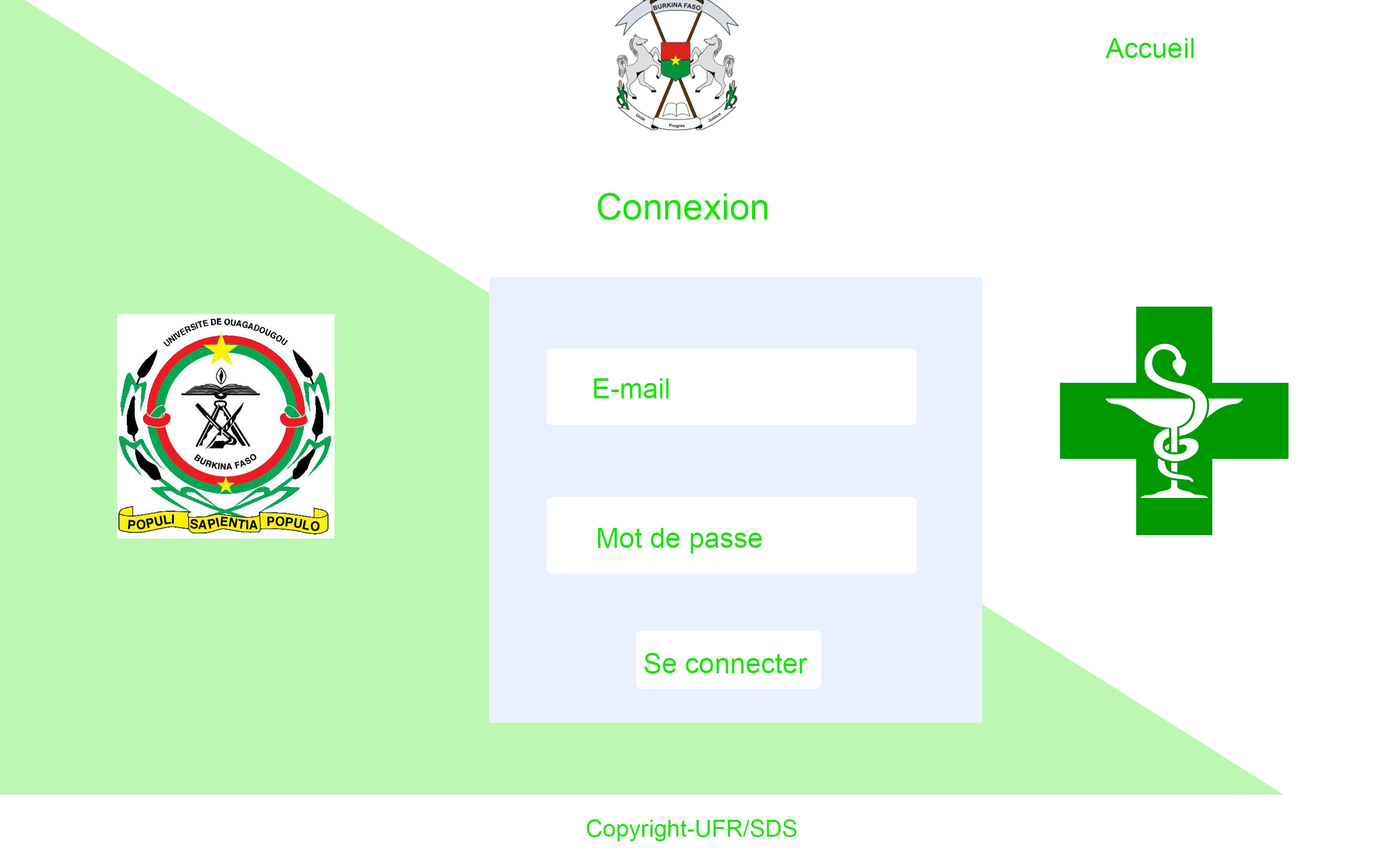
<style>
.page{position:relative;width:1381px;height:864px;background:#ffffff}
.page>*{position:absolute;margin:0}
.t1{font:27.8px "ArialMT";color:#1ee00f}
.t2{font:36.4px "ArialMT";color:#1ee00f}
.t3{font:23.5px "ArialMT";color:#1ee00f}
</style>
<div class="page">
<p class="t1" style="left:1105px;top:38px;width:89px;height:20px">Accueil</p>
<p class="t2" style="left:597px;top:193px;width:170px;height:27px">Connexion</p>
<p class="t1" style="left:594px;top:378px;width:75px;height:20px">E-mail</p>
<p class="t1" style="left:598px;top:528px;width:164px;height:25px">Mot de passe</p>
<p class="t1" style="left:644px;top:652px;width:164px;height:21px">Se connecter</p>
<p class="t3" style="left:587px;top:819px;width:210px;height:22px">Copyright-UFR/SDS</p>
</div>
